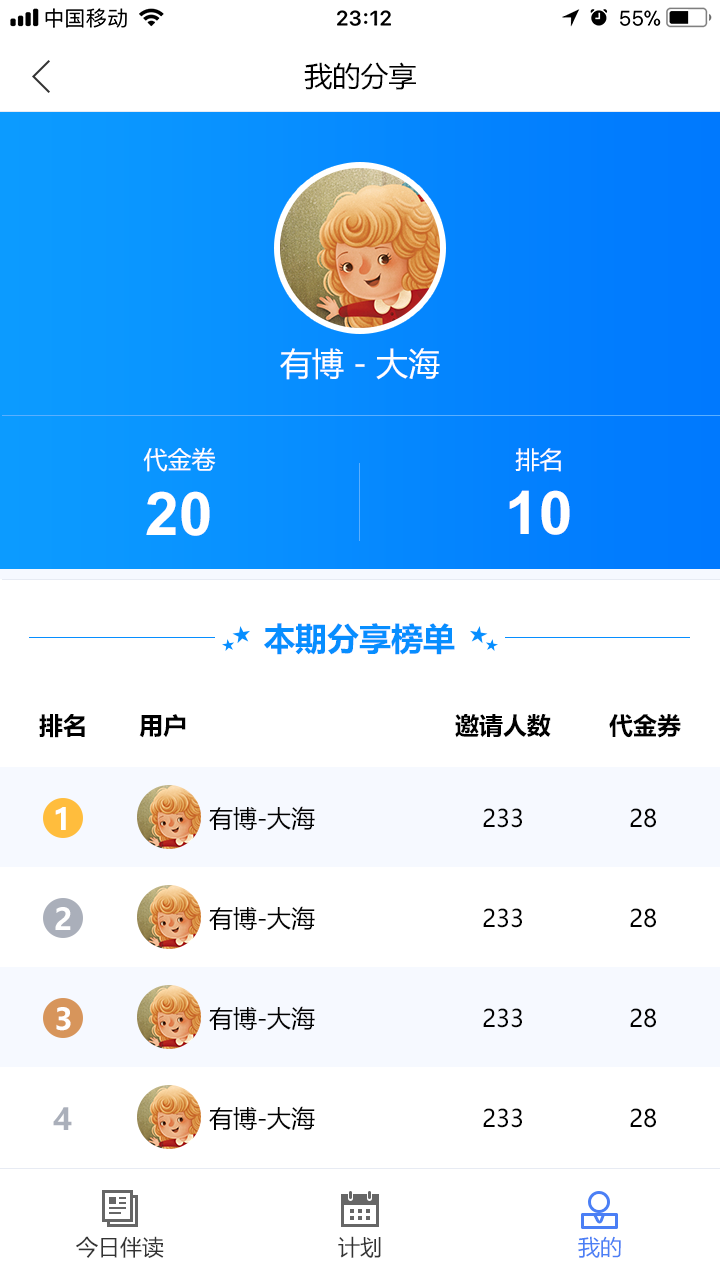
<style>
.page{position:relative;width:720px;height:1280px;background:#ffffff}
.page>*{position:absolute;margin:0}
.t1{font:28px "MicrosoftYaHei";color:#000000}
.t2{font:32px "MicrosoftYaHei";color:#ffffff}
.t3{font:24px "MicrosoftYaHei";color:#ffffff}
.t4{font:60px "Arial-BoldMT";color:#ffffff}
.t5{font:32px "MicrosoftYaHei-Bold";color:#078eff}
.t6{font:24px "MicrosoftYaHei-Bold";color:#000000}
.t7{font:30px "MicrosoftYaHei-Bold";color:#ffffff}
.t8{font:24px "MicrosoftYaHei";color:#010101}
.t9{font:30px "MicrosoftYaHei-Bold";color:#aaafba}
.t10{font:22px "MicrosoftYaHei";color:#333333}
.t11{font:22px "MicrosoftYaHei";color:#4b7ff5}
</style>
<div class="page">
<p class="t1" style="left:304px;top:62px;width:112px;height:28px">我的分享</p>
<p class="t2" style="left:280px;top:348px;width:160px;height:32px">有博 - 大海</p>
<p class="t3" style="left:143px;top:447px;width:73px;height:25px">代金卷</p>
<p class="t3" style="left:515px;top:448px;width:46px;height:24px">排名</p>
<p class="t4" style="left:146px;top:491px;width:64px;height:45px">20</p>
<p class="t4" style="left:509px;top:490px;width:61px;height:45px">10</p>
<p class="t5" style="left:264px;top:623px;width:191px;height:32px">本期分享榜单</p>
<p class="t6" style="left:39px;top:714px;width:46px;height:24px">排名</p>
<p class="t6" style="left:139px;top:714px;width:47px;height:24px">用户</p>
<p class="t6" style="left:455px;top:714px;width:96px;height:24px">邀请人数</p>
<p class="t6" style="left:609px;top:714px;width:72px;height:24px">代金券</p>
<p class="t7" style="left:55px;top:807px;width:11px;height:23px">1</p>
<p class="t8" style="left:209px;top:806px;width:106px;height:24px">有博-大海</p>
<p class="t8" style="left:483px;top:808px;width:39px;height:20px">233</p>
<p class="t8" style="left:630px;top:808px;width:26px;height:20px">28</p>
<p class="t7" style="left:55px;top:907px;width:16px;height:23px">2</p>
<p class="t8" style="left:209px;top:906px;width:106px;height:24px">有博-大海</p>
<p class="t8" style="left:483px;top:908px;width:39px;height:20px">233</p>
<p class="t8" style="left:630px;top:908px;width:26px;height:20px">28</p>
<p class="t7" style="left:56px;top:1007px;width:15px;height:24px">3</p>
<p class="t8" style="left:209px;top:1006px;width:106px;height:24px">有博-大海</p>
<p class="t8" style="left:483px;top:1008px;width:39px;height:20px">233</p>
<p class="t8" style="left:630px;top:1008px;width:26px;height:20px">28</p>
<p class="t9" style="left:53px;top:1107px;width:19px;height:23px">4</p>
<p class="t8" style="left:209px;top:1106px;width:106px;height:24px">有博-大海</p>
<p class="t8" style="left:483px;top:1108px;width:39px;height:20px">233</p>
<p class="t8" style="left:630px;top:1108px;width:26px;height:20px">28</p>
<p class="t10" style="left:76px;top:1236px;width:88px;height:22px">今日伴读</p>
<p class="t10" style="left:338px;top:1236px;width:43px;height:22px">计划</p>
<p class="t11" style="left:578px;top:1236px;width:43px;height:22px">我的</p>
</div>
